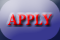
<style>
.page{position:relative;width:60px;height:40px}
.page>*{position:absolute;margin:0}
.t1{font:14px "MyungjoXB-HM"}
</style>
<div class="page">
<p class="t1" style="left:8px;top:14px;width:44px;height:11px">APPLY</p>
</div>
